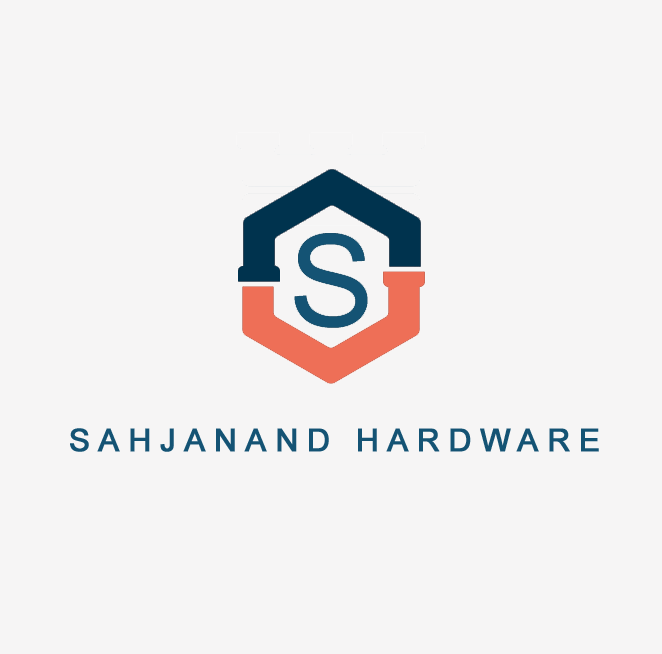
<style>
.page{position:relative;width:662px;height:654px;background:#f6f5f5}
.page>*{position:absolute;margin:0}
.t1{font:31.5px "ArialMT";letter-spacing:0.25em;color:#145374;font-weight:bold}
</style>
<div class="page">
<p class="t1" style="left:70px;top:428px;width:529px;height:24px">SAHJANAND HARDWARE</p>
</div>
